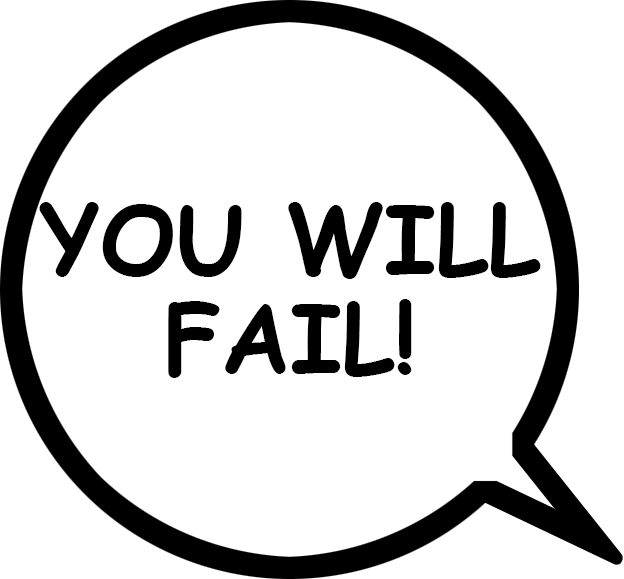
<style>
.page{position:relative;width:624px;height:579px;background:#ffffff}
.page>*{position:absolute;margin:0}
.t1{font:94.5px/99.4px "ComicSansMS-Bold";color:#000000}
</style>
<div class="page">
<p class="t1" style="left:39px;top:202px;width:502px;height:176px;text-align:center">YOU WILL<br>FAIL!</p>
</div>
